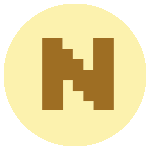
<style>
.page{position:relative;width:150px;height:150px;background:#fcf2ae}
.page>*{position:absolute;margin:0}
.t1{font:144px "ArcadeClassic";letter-spacing:0.05em;color:#9e6e23}
</style>
<div class="page">
<p class="t1" style="left:42px;top:38px;width:72px;height:72px">n</p>
</div>
